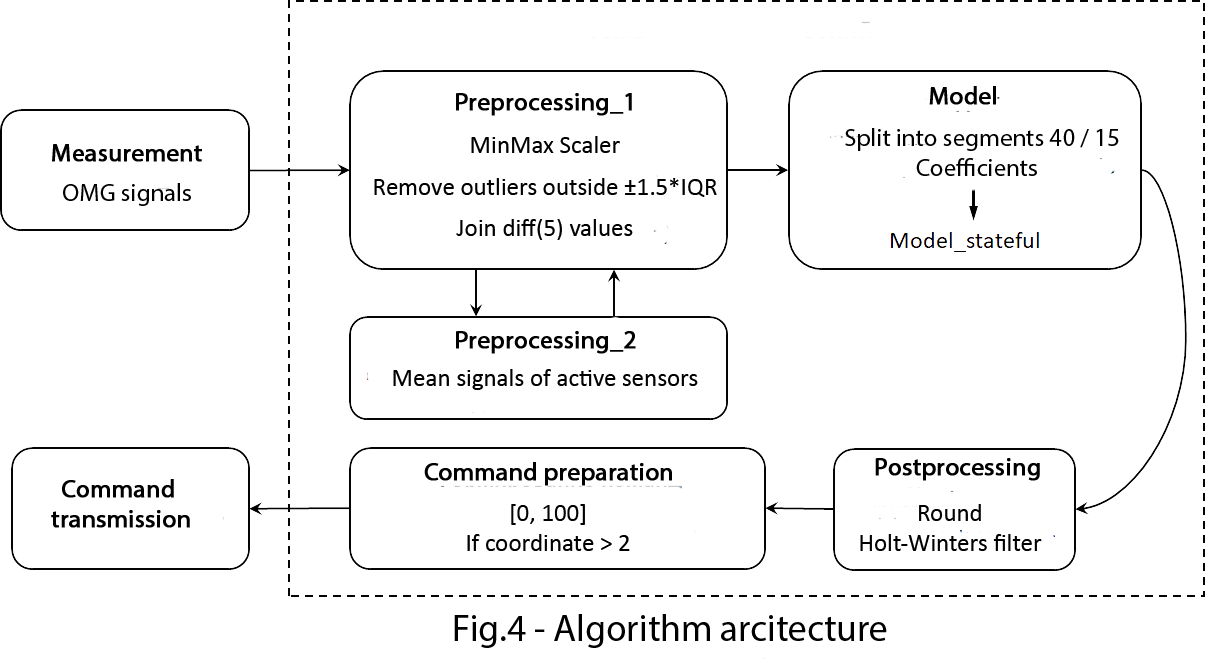
<style>
.page{position:relative;width:1205px;height:671px;background:#ffffff}
.page>*{position:absolute;margin:0}
.t1{font:25px "MyriadPro-Regular";color:#000000;font-weight:bold}
.t2{font:25px/41.7px "Calibri";color:#000000}
.t3{font:25px "Calibri";color:#000000}
.t4{font:25px "MyriadPro-Regular";color:#000000}
.t5{font:37.5px "MyriadPro-Regular";color:#000000}
</style>
<div class="page">
<p class="t1" style="left:929px;top:86px;width:67px;height:19px">Model</p>
<p class="t1" style="left:456px;top:93px;width:176px;height:23px">Preprocessing_1</p>
<p class="t2" style="left:374px;top:136px;width:343px;height:104px;text-align:center"><span class="t3">MinMax Scaler<br>R</span>emove outliers outside ±1.5*IQR<br>Join diff(5) values</p>
<p class="t4" style="left:845px;top:128px;width:274px;height:48px;text-align:center">Split into segments 40 / 15<br>Coefficients</p>
<p class="t1" style="left:52px;top:144px;width:150px;height:18px">Measurement</p>
<p class="t4" style="left:63px;top:183px;width:128px;height:23px">OMG signals</p>
<p class="t1" style="left:456px;top:331px;width:180px;height:23px">Preprocessing_2</p>
<p class="t3" style="left:393px;top:369px;width:305px;height:21px">Mean signals of active sensors</p>
<p class="t1" style="left:424px;top:462px;width:248px;height:24px">Command preparation</p>
<p class="t1" style="left:875px;top:458px;width:165px;height:23px">Postprocessing</p>
<p class="t1" style="left:51px;top:479px;width:139px;height:49px;text-align:center">Command <br>transmission</p>
<p class="t3" style="left:467px;top:504px;width:163px;height:47px;text-align:center">[0, 100]<br>If coordinate &gt; 2</p>
<p class="t3" style="left:860px;top:504px;width:182px;height:47px;text-align:center">Round<br>Holt-Winters filter</p>
<p class="t5" style="left:454px;top:614px;width:433px;height:34px">Fig.4 - Algorithm arcitecture</p>
</div>
